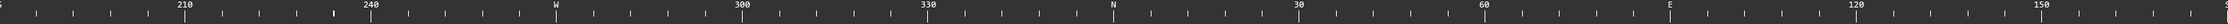
<style>
.page{position:relative;width:2228px;height:24px;background:#333333}
.page>*{position:absolute;margin:0}
.t1{font:9px "Consolas";letter-spacing:0.02em;color:#ffffff}
</style>
<div class="page">
<p class="t1" style="left:178px;top:2px;width:15px;height:6px">210</p>
<p class="t1" style="left:364px;top:2px;width:15px;height:6px">240</p>
<p class="t1" style="left:554px;top:2px;width:5px;height:6px">W</p>
<p class="t1" style="left:735px;top:2px;width:15px;height:6px">300</p>
<p class="t1" style="left:921px;top:2px;width:15px;height:6px">330</p>
<p class="t1" style="left:1111px;top:2px;width:5px;height:6px">N</p>
<p class="t1" style="left:1294px;top:2px;width:10px;height:6px">30</p>
<p class="t1" style="left:1479px;top:2px;width:10px;height:6px">60</p>
<p class="t1" style="left:1668px;top:2px;width:4px;height:6px">E</p>
<p class="t1" style="left:1849px;top:2px;width:15px;height:6px">120</p>
<p class="t1" style="left:2034px;top:2px;width:15px;height:6px">150</p>
</div>
